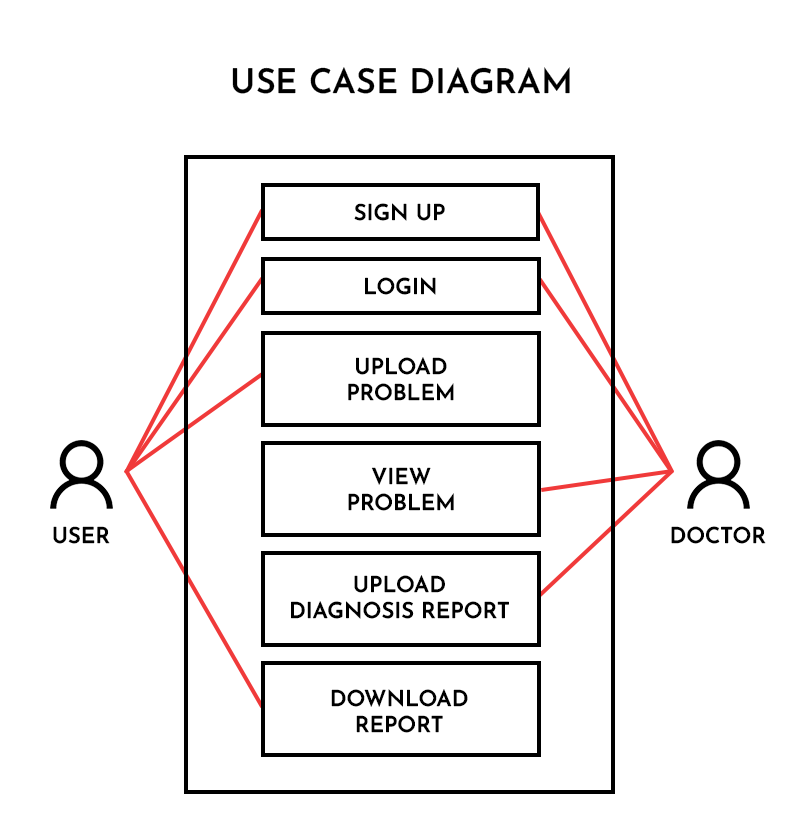
<style>
.page{position:relative;width:800px;height:834px;background:#ffffff}
.page>*{position:absolute;margin:0}
.t1{font:34px "JosefinSans-SemiBold";color:#000000}
.t2{font:22px "JosefinSans-SemiBold";color:#000000}
</style>
<div class="page">
<p class="t1" style="left:232px;top:67px;width:338px;height:27px">USE CASE DIAGRAM</p>
<p class="t2" style="left:354px;top:203px;width:91px;height:18px">SIGN UP</p>
<p class="t2" style="left:365px;top:277px;width:71px;height:18px">LOGIN</p>
<p class="t2" style="left:348px;top:357px;width:106px;height:44px;text-align:center">UPLOAD<br>PROBLEM</p>
<p class="t2" style="left:348px;top:467px;width:106px;height:44px;text-align:center">VIEW<br>PROBLEM</p>
<p class="t2" style="left:53px;top:526px;width:57px;height:18px">USER</p>
<p class="t2" style="left:671px;top:526px;width:95px;height:18px">DOCTOR</p>
<p class="t2" style="left:291px;top:575px;width:218px;height:44px;text-align:center">UPLOAD<br>DIAGNOSIS REPORT</p>
<p class="t2" style="left:331px;top:689px;width:137px;height:44px;text-align:center">DOWNLOAD<br>REPORT</p>
</div>
